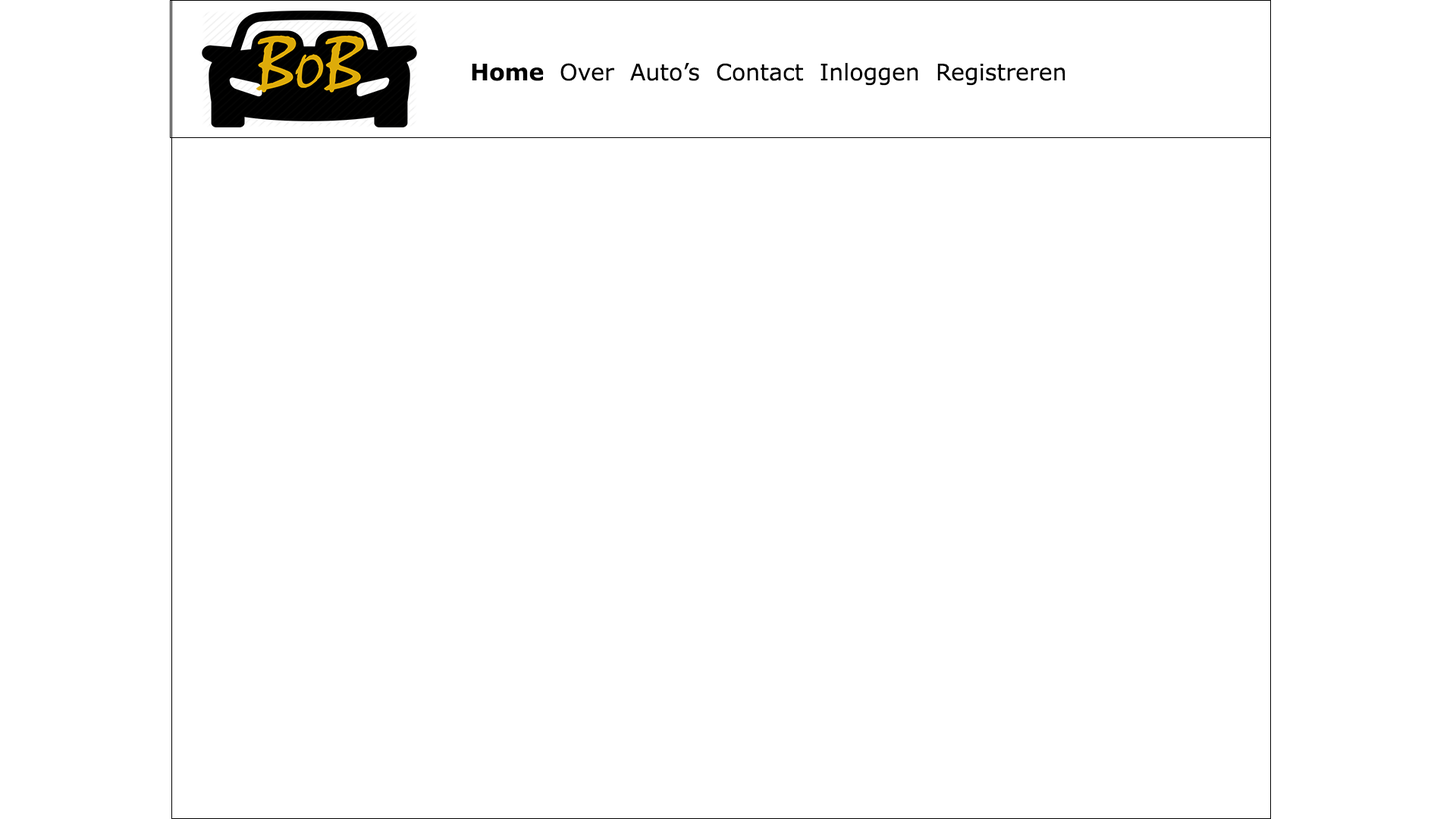
<style>
.page{position:relative;width:1456px;height:819px;background:#ffffff}
.page>*{position:absolute;margin:0}
.t1{font:22.7px "Verdana-Bold";color:#000000}
.t2{font:22.7px "Verdana";color:#000000}
</style>
<div class="page">
<p class="t1" style="left:472px;top:64px;width:72px;height:17px">Home</p>
<p class="t2" style="left:560px;top:63px;width:505px;height:23px">Over  Auto’s  Contact  Inloggen  Registreren</p>
</div>
